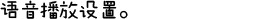
<style>
.page{position:relative;width:273px;height:19px;background:#ffffff}
.page>*{position:absolute;margin:0}
.t1{font:22px "¢è?";color:#000000}
</style>
<div class="page">
<p class="t1" style="left:0px;top:0px;width:128px;height:19px">语音播放设置。</p>
</div>
